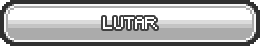
<style>
.page{position:relative;width:260px;height:46px;background:#ababab}
.page>*{position:absolute;margin:0}
.t1{font:16px "Minecraft";color:#ffffff}
</style>
<div class="page">
<p class="t1" style="left:103px;top:17px;width:54px;height:12px">LUTAR</p>
</div>
